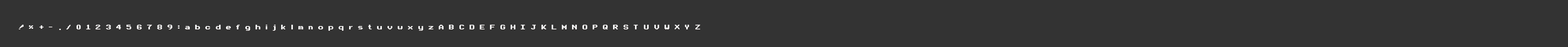
<style>
.page{position:relative;width:1568px;height:47px;background:#333333}
.page>*{position:absolute;margin:0}
.t1{font:9.8px "Arcade";letter-spacing:0.5em;color:#ffffff;font-weight:bold}
</style>
<div class="page">
<p class="t1" style="left:19px;top:24px;width:681px;height:7px">!%+-./0123456789:abcdefghijklmnopqrstuvwxyzABCDEFGHIJKLMNOPQRSTUVWXYZ</p>
</div>
